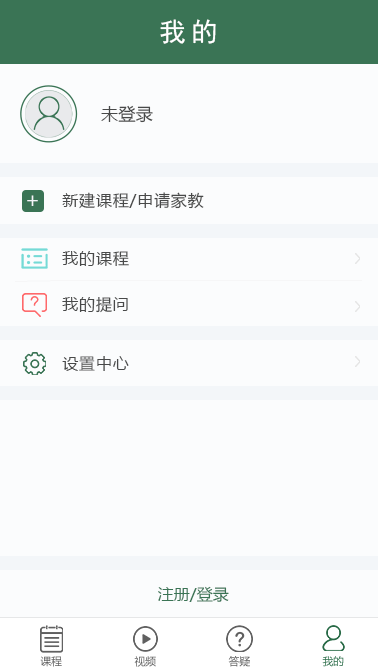
<style>
.page{position:relative;width:378px;height:672px;background:#fbfcfd}
.page>*{position:absolute;margin:0}
.t1{font:26.7px "SimHei";letter-spacing:0.2em;color:#ffffff}
.t2{font:17.3px "MicrosoftYaHei";color:#484949}
.t3{font:13.2px "AdobeHeitiStd-Regular";color:#f3f6f9}
.t4{font:16px "MicrosoftYaHei";letter-spacing:0.05em;color:#484949}
.t5{font:16px "MicrosoftYaHei";color:#3a7455}
.t6{font:10.7px "MicrosoftYaHei";color:#606060}
.t7{font:10.7px "MicrosoftYaHei"}
.t8{font:10.7px "MicrosoftYaHei";color:#286a46}
</style>
<div class="page">
<p class="t1" style="left:160px;top:19px;width:56px;height:25px">我的</p>
<p class="t2" style="left:101px;top:105px;width:52px;height:18px">未登录</p>
<p class="t3" style="left:27px;top:195px;width:11px;height:11px">+</p>
<p class="t4" style="left:62px;top:192px;width:142px;height:17px">新建课程/申请家教</p>
<p class="t4" style="left:62px;top:251px;width:67px;height:15px">我的课程</p>
<p class="t4" style="left:62px;top:297px;width:66px;height:16px">我的提问</p>
<p class="t4" style="left:62px;top:356px;width:67px;height:15px">设置中心</p>
<p class="t5" style="left:158px;top:586px;width:71px;height:16px">注册/登录</p>
<p class="t6" style="left:40px;top:656px;width:22px;height:11px">课程</p>
<p class="t6" style="left:134px;top:656px;width:22px;height:11px">视频</p>
<p class="t7" style="left:228px;top:656px;width:22px;height:11px">答疑</p>
<p class="t8" style="left:322px;top:656px;width:22px;height:11px">我的</p>
</div>
